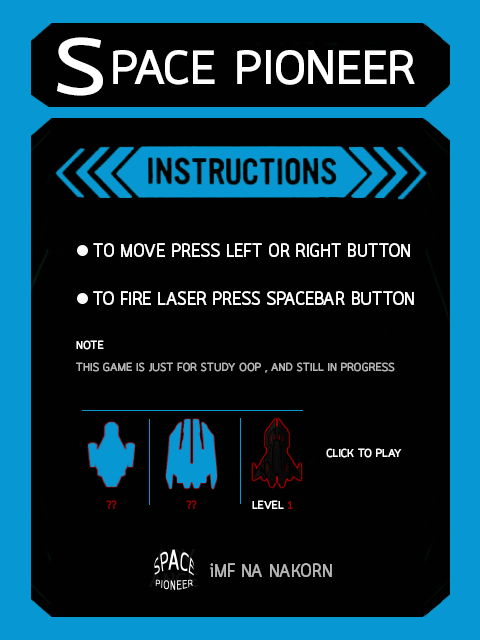
<style>
.page{position:relative;width:480px;height:640px;background:#010101}
.page>*{position:absolute;margin:0}
.t1{font:80px "Quark-Bold";letter-spacing:0.005em;color:#ffffff;scale:1.2 1}
.t2{font:47.4px "Quark-Bold";letter-spacing:0.005em;color:#ffffff}
.t3{font:19px "Quark-Bold";letter-spacing:0.005em;color:#ffffff;scale:0.92 1}
.t4{font:11.7px "Quark-Bold";letter-spacing:0.005em;color:#ffffff}
.t5{font:11.7px "Quark-Bold";letter-spacing:0.005em;color:#b4b4b4}
.t6{font:11.7px "Quark-Bold";letter-spacing:0.005em;color:#990101}
.t7{font:19px "Quark-Bold";letter-spacing:0.005em;color:#b5b5b5;scale:0.92 1}
</style>
<div class="page">
<p class="t1" style="left:57px;top:37px;width:46px;height:59px">S</p>
<p class="t2" style="left:113px;top:50px;width:102px;height:35px">PACE</p>
<p class="t2" style="left:237px;top:50px;width:178px;height:35px">PIONEER</p>
<p class="t3" style="left:93px;top:243px;width:317px;height:14px">TO MOVE PRESS LEFT OR RIGHT BUTTON</p>
<p class="t3" style="left:93px;top:291px;width:321px;height:14px">TO FIRE LASER PRESS SPACEBAR BUTTON</p>
<p class="t4" style="left:76px;top:340px;width:28px;height:10px">NOTE</p>
<p class="t5" style="left:76px;top:362px;width:319px;height:11px">THIS GAME IS JUST FOR STUDY OOP , AND STILL IN PROGRESS</p>
<p class="t4" style="left:326px;top:448px;width:76px;height:10px">CLICK TO PLAY</p>
<p class="t6" style="left:106px;top:500px;width:11px;height:9px">??</p>
<p class="t6" style="left:186px;top:500px;width:11px;height:9px">??</p>
<p class="t4" style="left:252px;top:500px;width:32px;height:9px">LEVEL</p>
<p class="t6" style="left:287px;top:501px;width:6px;height:8px">1</p>
<p class="t7" style="left:210px;top:563px;width:122px;height:14px">iMF NA NAKORN</p>
</div>
